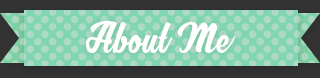
<style>
.page{position:relative;width:320px;height:78px;background:#81d5b0}
.page>*{position:absolute;margin:0}
.t1{font:42.8px "MJZhafiraDemo";color:#ffffff}
</style>
<div class="page">
<p class="t1" style="left:86px;top:20px;width:150px;height:33px">About Me</p>
</div>
